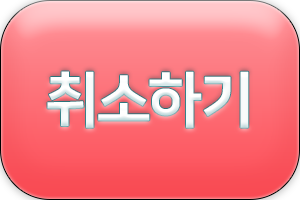
<style>
.page{position:relative;width:300px;height:200px}
.page>*{position:absolute;margin:0}
.t1{font:60px "NanumSquare_acEB";color:#ffffff}
</style>
<div class="page">
<p class="t1" style="left:47px;top:71px;width:202px;height:57px">취소하기</p>
</div>
